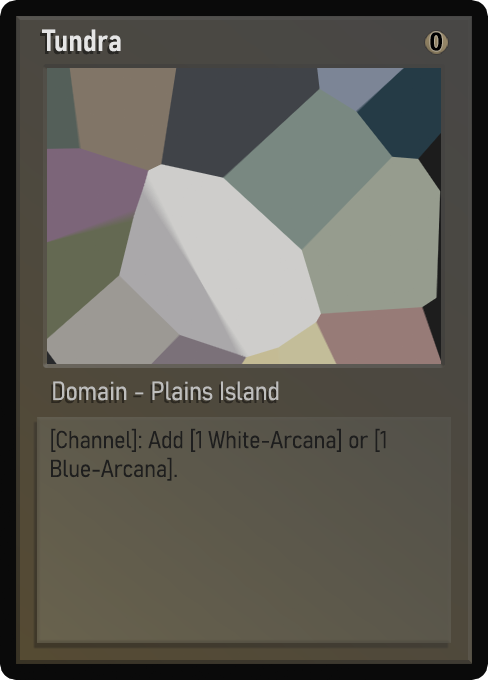
<style>
.page{position:relative;width:488px;height:680px}
.page>*{position:absolute;margin:0}
.t1{font:30px "Bahnschrift-SemiBoldSemiCondensed";color:#f2f2f2;font-weight:bold}
.t2{font:25px "WTRRoycroft";color:#000000;font-weight:bold;scale:1.09 1}
.t3{font:26px "Bahnschrift-LightSemiCondensed";color:#c8c8c8;font-weight:bold}
.t4{font:24px "Bahnschrift-LightSemiCondensed";color:#1e1e1e;font-weight:bold}
</style>
<div class="page">
<p class="t1" style="left:42px;top:29px;width:79px;height:23px;opacity:0.9">Tundra</p>
<p class="t2" style="left:430px;top:32px;width:12px;height:19px">0</p>
<p class="t3" style="left:53px;top:381px;width:226px;height:20px;opacity:0.9">Domain - Plains Island</p>
<p class="t4" style="left:51px;top:428px;width:335px;height:53px">[Channel]: Add [1 White-Arcana] or [1 Blue-Arcana].</p>
</div>
